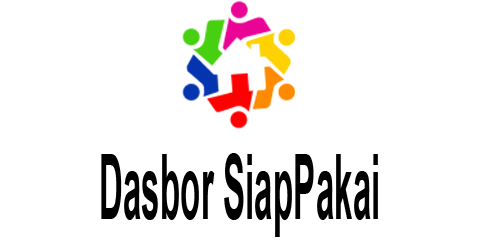
<style>
.page{position:relative;width:480px;height:240px;background:#ffffff}
.page>*{position:absolute;margin:0}
.t1{font:90px "Arial-BoldMT";color:#000000;scale:0.37 1}
</style>
<div class="page">
<p class="t1" style="left:101px;top:153px;width:277px;height:84px">Dasbor SiapPakai</p>
</div>
